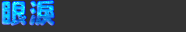
<style>
.page{position:relative;width:186px;height:32px;background:#333333}
.page>*{position:absolute;margin:0}
.t1{font:28px "DFYuanStd-W12"}
</style>
<div class="page">
<p class="t1" style="left:1px;top:0px;width:54px;height:26px">眼淚</p>
</div>
